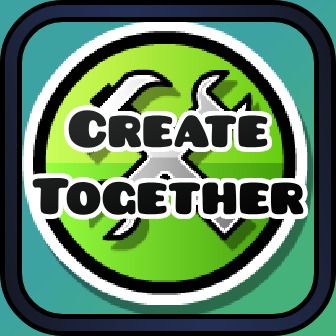
<style>
.page{position:relative;width:336px;height:336px}
.page>*{position:absolute;margin:0}
.t1{font:56px "Pusab";color:#151616}
</style>
<div class="page">
<p class="t1" style="left:32px;top:110px;width:272px;height:105px;text-align:center">Create<br>Together</p>
</div>
